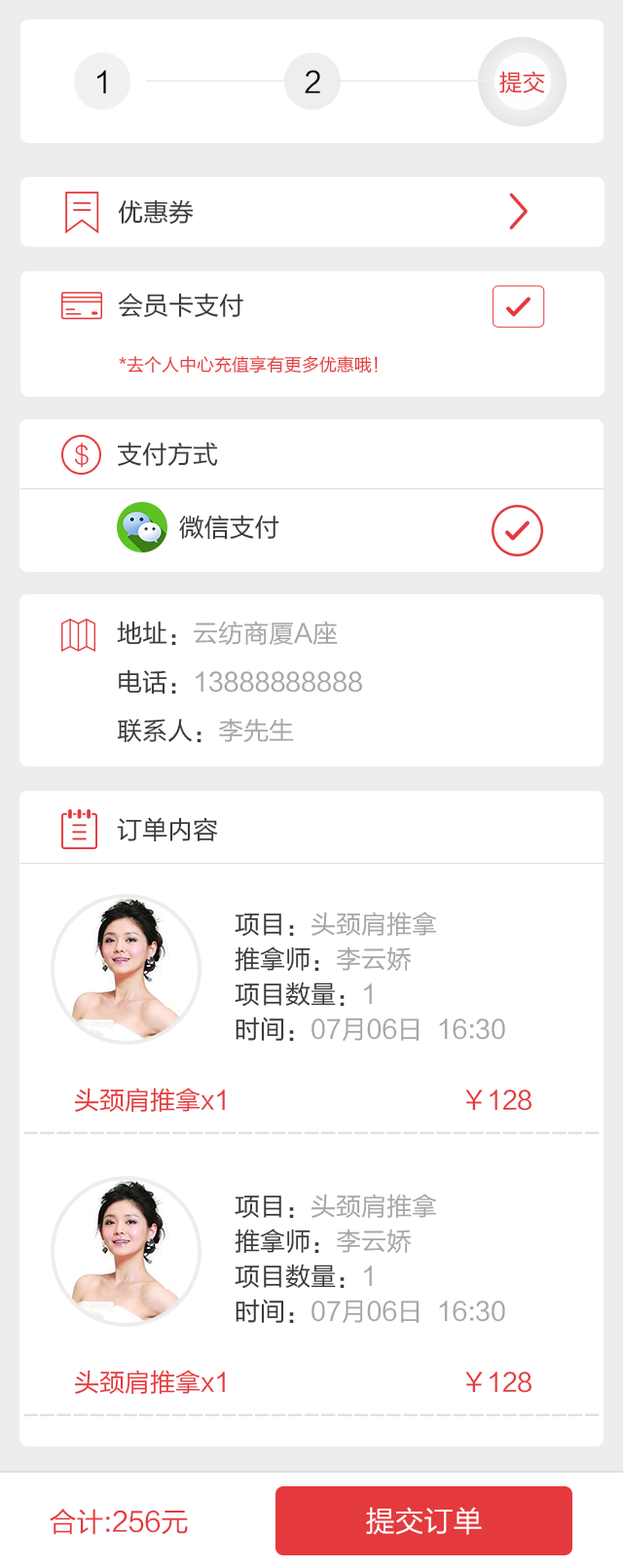
<style>
.page{position:relative;width:623px;height:1568px;background:#ffffff}
.page>*{position:absolute;margin:0}
.t1{font:29.2px "FZLTHJW--GB1-0";color:#000000}
.t2{font:23.3px "FZLTHJW--GB1-0";color:#e43a3d}
.t3{font:25.3px "FZLTHJW--GB1-0";color:#393939}
.t4{font:17.5px "FZLTHJW--GB1-0";color:#e43a3d}
.t5{font:25.3px "FZLTXHK";color:#e43a3d}
.t6{font:25.3px/48.6px "FZLTHJW--GB1-0";color:#a6a6a6}
.t7{font:25.3px/48.6px "FZLTHJW--GB1-0";color:#393939}
.t8{font:25.3px/35px "FZLTHJW--GB1-0";color:#a6a6a6}
.t9{font:25.3px/35px "FZLTHJW--GB1-0";color:#393939}
.t10{font:25.3px "FZLTHJW--GB1-0";color:#e43a3d}
.t11{font:25.3px "FZLTHJW--GB1-0";color:#dddddd}
.t12{font:27.2px "FZLTHJW--GB1-0";color:#e43a3d}
.t13{font:29.2px "FZLTHJW--GB1-0";color:#ffffff}
</style>
<div class="page">
<p class="t1" style="left:97px;top:70px;width:9px;height:23px">1</p>
<p class="t1" style="left:304px;top:70px;width:16px;height:23px">2</p>
<p class="t2" style="left:499px;top:71px;width:46px;height:22px">提交</p>
<p class="t3" style="left:119px;top:199px;width:75px;height:25px">优惠券</p>
<p class="t3" style="left:118px;top:293px;width:125px;height:24px">会员卡支付</p>
<p class="t4" style="left:119px;top:356px;width:258px;height:18px">*去个人中心充值享有更多优惠哦！</p>
<p class="t5" style="left:75px;top:443px;width:14px;height:25px">$</p>
<p class="t3" style="left:117px;top:442px;width:101px;height:24px">支付方式</p>
<p class="t3" style="left:179px;top:515px;width:100px;height:25px">微信支付</p>
<p class="t6" style="left:117px;top:621px;width:245px;height:122px"><span class="t7">地址：</span>云纺商厦A座<br><span class="t7">电话：</span>13888888888<br><span class="t7">联系人：</span>李先生</p>
<p class="t3" style="left:117px;top:817px;width:101px;height:25px">订单内容</p>
<p class="t8" style="left:234px;top:911px;width:271px;height:131px"><span class="t9">项目：</span>头颈肩推拿<br><span class="t9">推拿师：</span>李云娇<br><span class="t9">项目数量：</span>1<br><span class="t9">时间：</span>07月06日  16:30</p>
<p class="t10" style="left:74px;top:1087px;width:457px;height:26px">头颈肩推拿x1                                 ￥128</p>
<p class="t11" style="left:23px;top:1131px;width:576px;height:3px">-----------------------------------</p>
<p class="t8" style="left:234px;top:1194px;width:271px;height:130px"><span class="t9">项目：</span>头颈肩推拿<br><span class="t9">推拿师：</span>李云娇<br><span class="t9">项目数量：</span>1<br><span class="t9">时间：</span>07月06日  16:30</p>
<p class="t10" style="left:74px;top:1370px;width:457px;height:25px">头颈肩推拿x1                                 ￥128</p>
<p class="t11" style="left:23px;top:1413px;width:576px;height:3px">-----------------------------------</p>
<p class="t12" style="left:50px;top:1509px;width:138px;height:26px">合计:256元</p>
<p class="t13" style="left:366px;top:1507px;width:115px;height:28px">提交订单</p>
</div>
